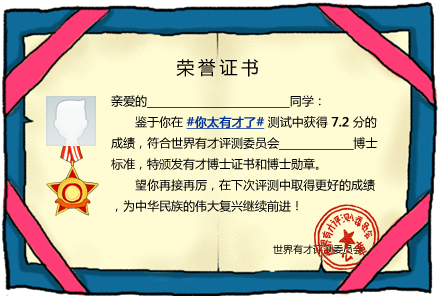
<style>
.page{position:relative;width:440px;height:296px;background:#fffcd4}
.page>*{position:absolute;margin:0}
.t1{font:18px "MicrosoftYaHei";letter-spacing:0.2em;color:#000000}
.t2{font:12px "MicrosoftYaHei";color:#000000}
.t3{font:12px "MicrosoftYaHei";color:#003399;font-weight:bold;text-decoration:underline}
.t4{font:12px "MicrosoftYaHei";color:#000000;font-weight:bold}
.t5{font:10px "MicrosoftYaHei";color:#000000}
</style>
<div class="page">
<p class="t1" style="left:176px;top:58px;width:82px;height:19px">荣誉证书</p>
<p class="t2" style="left:111px;top:95px;width:267px;height:117px">亲爱的 　　　　　　　　　　　 同学：<br>　　鉴于你在 <span class="t3">#你太有才了#</span> 测试中获得 <span class="t4">7.2</span> 分的成绩，符合世界有才评测委员会                     博士标准，特颁发有才博士证书和博士勋章。<br>　　望你再接再厉，在下次评测中取得更好的成绩，为中华民族的伟大复兴继续前进！</p>
<p class="t5" style="left:273px;top:244px;width:90px;height:11px">世界有才评测委员会</p>
</div>
